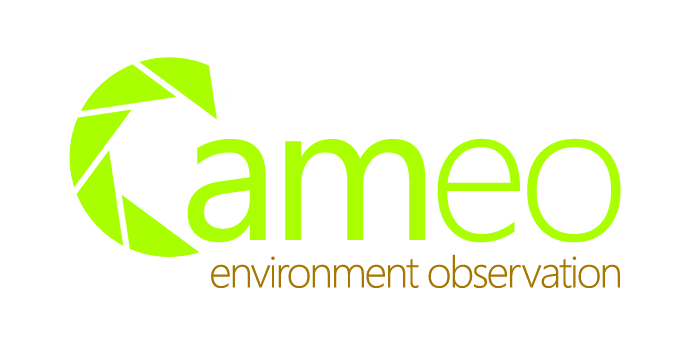
<style>
.page{position:relative;width:700px;height:350px;background:#ffffff}
.page>*{position:absolute;margin:0}
.t1{font:196.8px "SegoeUI";letter-spacing:-0.05em;color:#aaff00}
.t2{font:196.8px "SegoeUI-Light";letter-spacing:-0.05em;color:#aaff00}
.t3{font:44.1px "SegoeUI-Light";letter-spacing:-0.05em;color:#a87700}
</style>
<div class="page">
<p class="t1" style="left:187px;top:138px;width:434px;height:105px">am<span class="t2">eo</span></p>
<p class="t3" style="left:211px;top:254px;width:409px;height:34px">environment observation</p>
</div>
